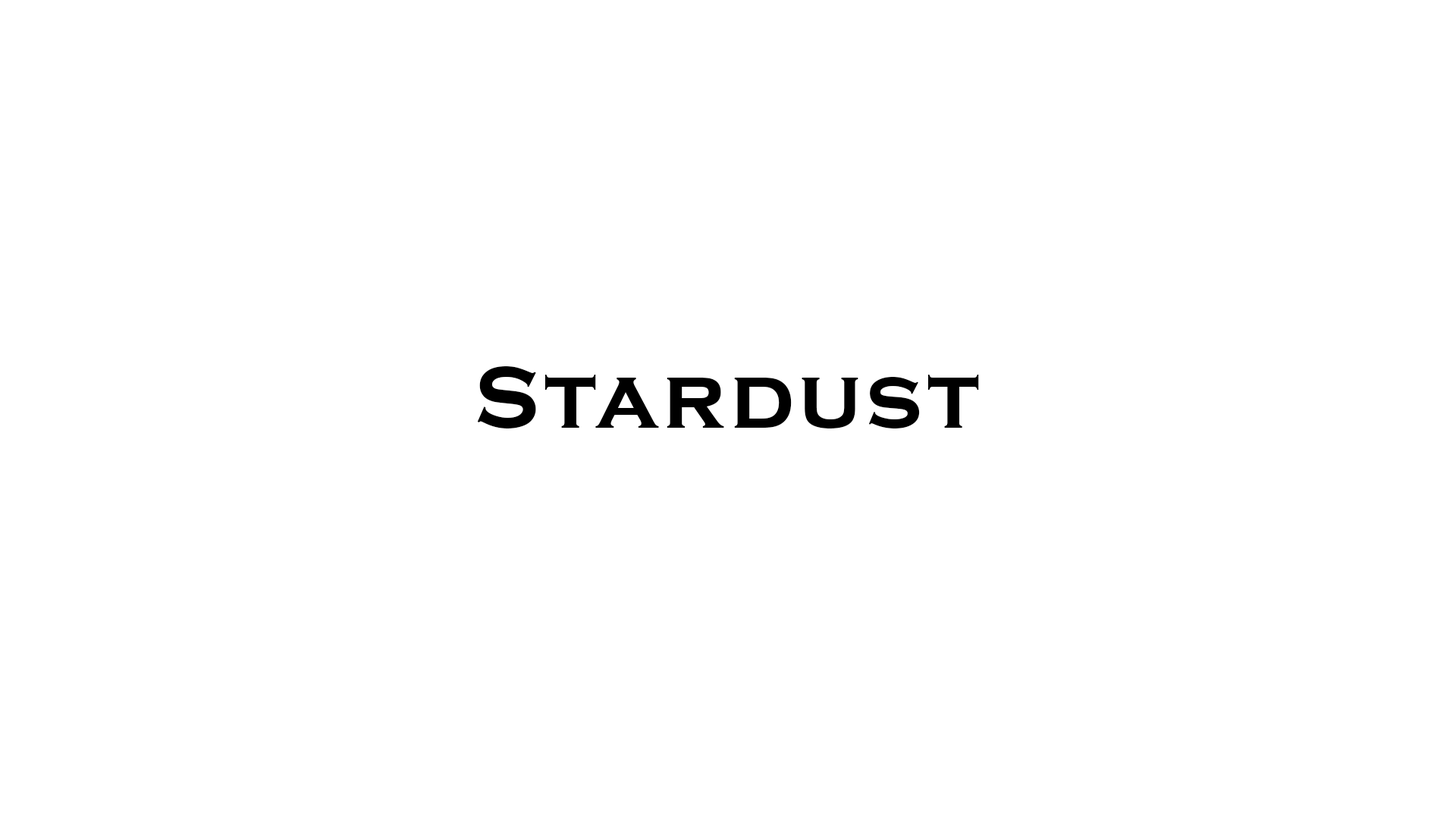
<style>
.page{position:relative;width:1456px;height:819px;background:#ffffff}
.page>*{position:absolute;margin:0}
.t1{font:91px "CopperplateGothic-Bold";letter-spacing:0.05em;color:#000000}
</style>
<div class="page">
<p class="t1" style="left:477px;top:366px;width:502px;height:62px">Stardust</p>
</div>
